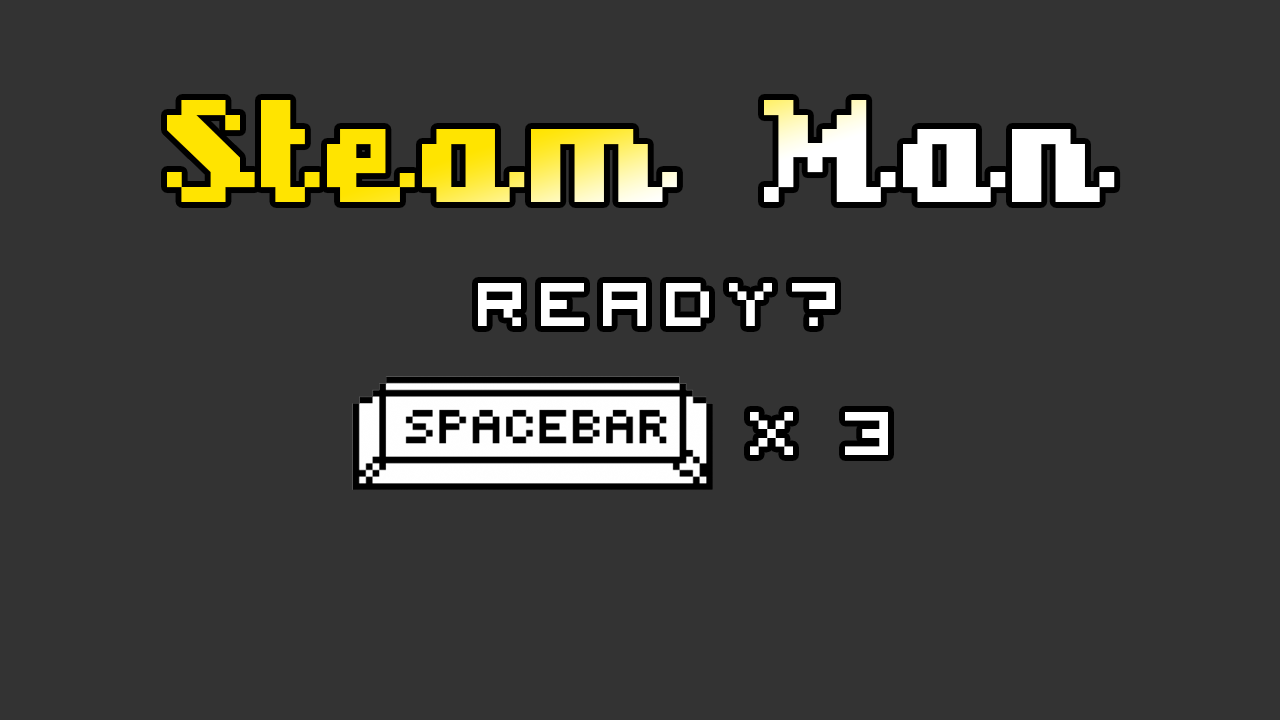
<style>
.page{position:relative;width:1280px;height:720px;background:#333333}
.page>*{position:absolute;margin:0}
.t1{font:145.8px "Superscript";letter-spacing:0.05em}
.t2{font:86.2px "VisitorTT1BRK";letter-spacing:0.13em;color:#ffffff}
.t3{font:86.2px "VisitorTT1BRK";letter-spacing:-0.05em;color:#ffffff}
</style>
<div class="page">
<p class="t1" style="left:167px;top:100px;width:948px;height:102px">Steam Man</p>
<p class="t2" style="left:478px;top:283px;width:357px;height:43px">ready?</p>
<p class="t3" style="left:750px;top:412px;width:138px;height:43px">x 3</p>
</div>
